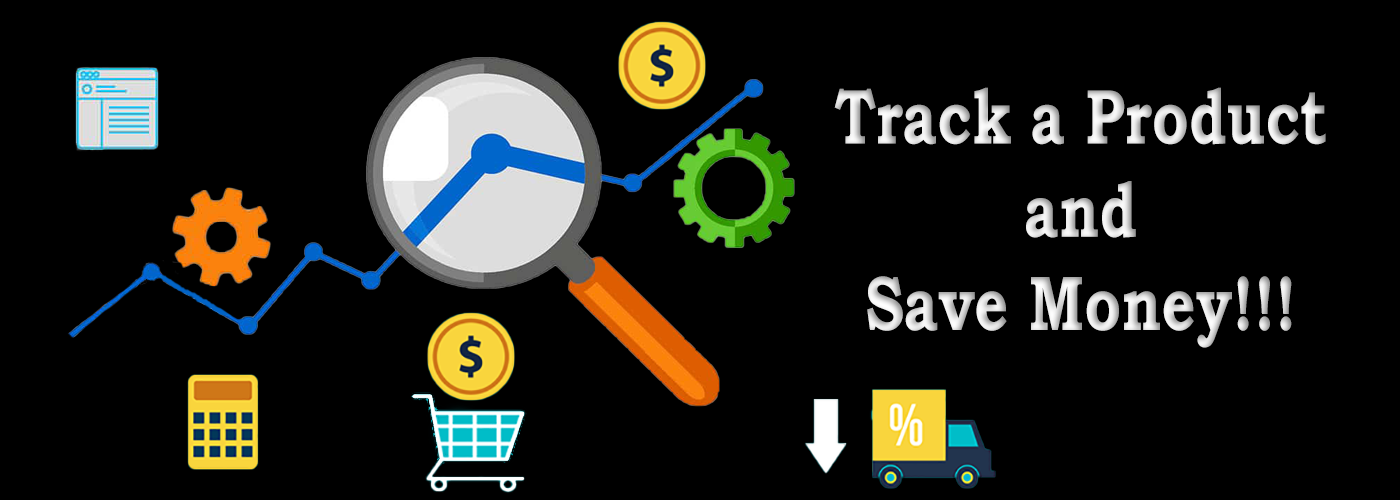
<style>
.page{position:relative;width:1400px;height:500px;background:#000000}
.page>*{position:absolute;margin:0}
.t1{font:77.7px "BookmanOldStyle-Bold";scale:0.76 1}
</style>
<div class="page">
<p class="t1" style="left:834px;top:87px;width:492px;height:261px;text-align:center">Track a Product<br>and<br>Save Money!!!</p>
</div>
